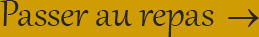
<style>
.page{position:relative;width:259px;height:37px;background:#cf9d03}
.page>*{position:absolute;margin:0}
.t1{font:45.8px "Gabriola";color:#262626}
</style>
<div class="page">
<p class="t1" style="left:0px;top:0px;width:214px;height:37px">Passer au repas</p>
</div>
